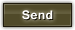
<style>
.page{position:relative;width:75px;height:30px;background:#504a29}
.page>*{position:absolute;margin:0}
.t1{font:12px "HelveticaNeue-Bold";letter-spacing:0.05em;color:#ffffff}
</style>
<div class="page">
<p class="t1" style="left:22px;top:10px;width:31px;height:10px">Send</p>
</div>
